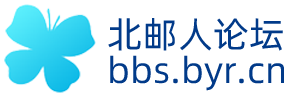
<style>
.page{position:relative;width:300px;height:100px;background:#ffffff}
.page>*{position:absolute;margin:0}
.t1{font:36px/18px "Alibaba-PuHuiTi-R";color:#013a89}
</style>
<div class="page">
<p class="t1" style="left:108px;top:18px;width:176px;height:73px">北邮人论坛<br><br>bbs.byr.cn</p>
</div>
